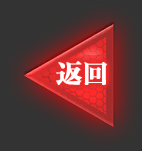
<style>
.page{position:relative;width:142px;height:151px;background:#333333}
.page>*{position:absolute;margin:0}
.t1{font:26px "RyuminPr6N-ExBold";color:#ffffff;font-weight:bold}
</style>
<div class="page">
<p class="t1" style="left:56px;top:61px;width:51px;height:24px">返回</p>
</div>
